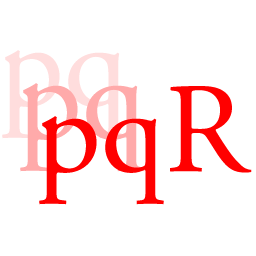
<style>
.page{position:relative;width:256px;height:256px;background:#ffffff}
.page>*{position:absolute;margin:0}
.t1{font:128px "AGaramondPro-Regular";color:#ff0000}
</style>
<div class="page">
<p class="t1" style="left:39px;top:86px;width:213px;height:119px">pqR</p>
</div>
